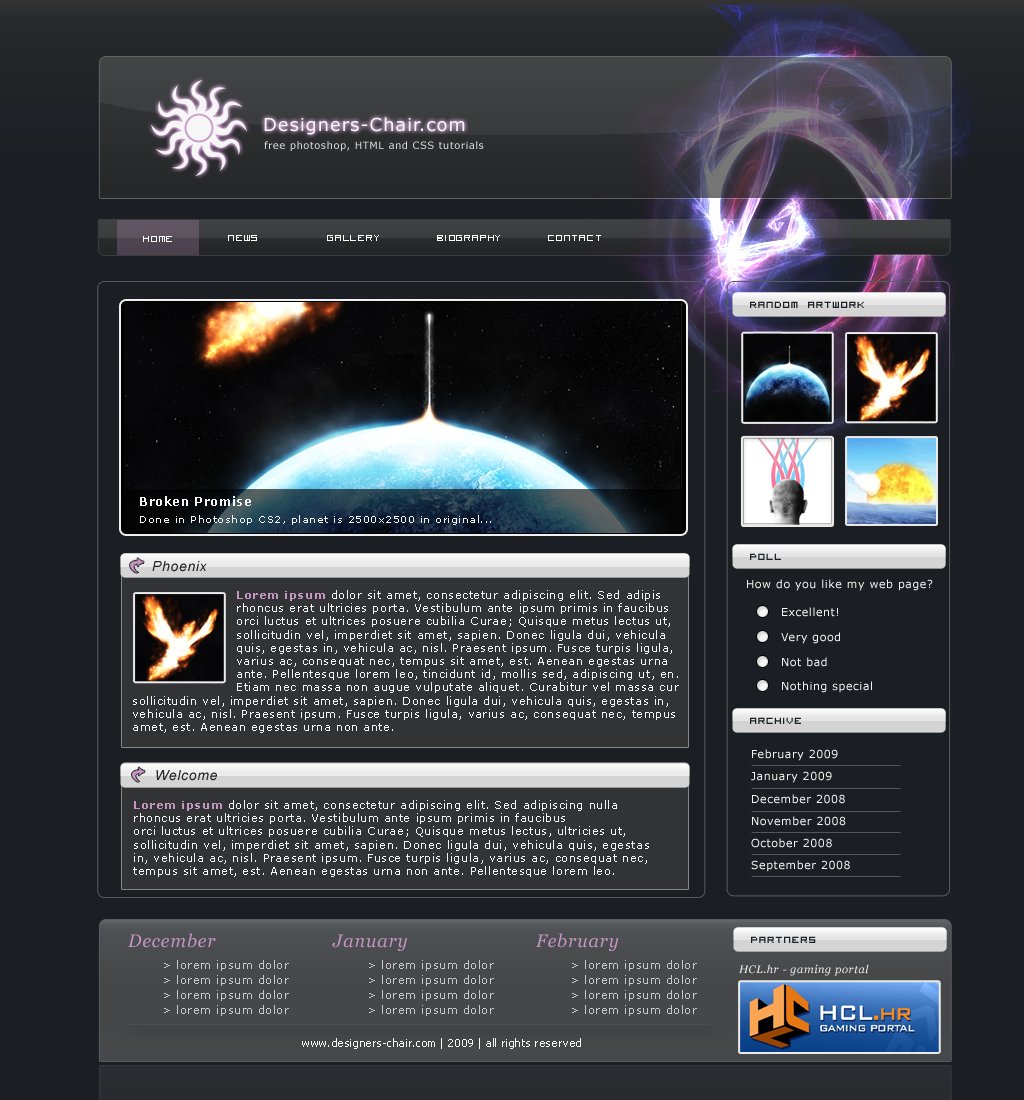
<style>
.page{position:relative;width:1024px;height:1100px;background:#1b1f23}
.page>*{position:absolute;margin:0}
.t1{font:18px "Verdana";letter-spacing:0.05em;color:#f6f6f6}
.t2{font:10px "Verdana";letter-spacing:0.05em;color:#dadada}
.t3{font:16px "VisitorTT2-BRK-";letter-spacing:0.05em;color:#ffffff}
.t4{font:16px "VisitorTT2-BRK-";letter-spacing:0.05em;color:#1c2024}
.t5{font:12px "Verdana-Bold";letter-spacing:0.05em;color:#f6f6f6}
.t6{font:10px "Verdana";letter-spacing:0.05em;color:#f6f6f6}
.t7{font:14px "Arial-ItalicMT";letter-spacing:0.05em;color:#242425}
.t8{font:11px "Verdana";letter-spacing:0.05em;color:#f1f1f1}
.t9{font:11px "Verdana";letter-spacing:0.05em;color:#f6f6f6}
.t10{font:11px "Verdana-Bold";letter-spacing:0.05em;color:#c594c1}
.t11{font:11px "Verdana";letter-spacing:0.05em;color:#f4f4f4}
.t12{font:18px "Georgia-Italic";letter-spacing:0.05em;color:#c594c1}
.t13{font:11px "Verdana";letter-spacing:0.05em;color:#c8c8c8}
.t14{font:11px "Georgia-Italic";letter-spacing:0.05em;color:#ebebeb}
.t15{font:11px "Tahoma";letter-spacing:0.05em;color:#fbfbfb}
</style>
<div class="page">
<p class="t1" style="left:264px;top:117px;width:201px;height:18px">Designers-Chair.com</p>
<p class="t2" style="left:264px;top:141px;width:220px;height:10px">free photoshop, HTML and CSS tutorials</p>
<p class="t3" style="left:143px;top:236px;width:29px;height:6px">home</p>
<p class="t3" style="left:228px;top:235px;width:29px;height:6px">news</p>
<p class="t3" style="left:327px;top:235px;width:52px;height:6px">gallery</p>
<p class="t3" style="left:437px;top:235px;width:63px;height:6px">biography</p>
<p class="t3" style="left:548px;top:235px;width:53px;height:6px">contact</p>
<p class="t4" style="left:750px;top:301px;width:114px;height:7px">Random artwork</p>
<p class="t5" style="left:140px;top:496px;width:111px;height:10px">Broken Promise</p>
<p class="t6" style="left:140px;top:515px;width:351px;height:10px">Done in Photoshop CS2, planet is 2500x2500 in original...</p>
<p class="t4" style="left:750px;top:553px;width:31px;height:7px">POLL</p>
<p class="t7" style="left:152px;top:561px;width:55px;height:11px">Phoenix</p>
<p class="t8" style="left:747px;top:579px;width:186px;height:12px">How do you like my web page?</p>
<p class="t9" style="left:237px;top:590px;width:442px;height:103px"><span class="t10">Lorem ipsum</span> dolor sit amet, consectetur adipiscing elit. Sed adipis <br>rhoncus erat ultricies porta. Vestibulum ante ipsum primis in faucibus <br>orci luctus et ultrices posuere cubilia Curae; Quisque metus lectus ut, <br>sollicitudin vel, imperdiet sit amet, sapien. Donec ligula dui, vehicula <br>quis, egestas in, vehicula ac, nisl. Praesent ipsum. Fusce turpis ligula, <br>varius ac, consequat nec, tempus sit amet, est. Aenean egestas urna<br>ante. Pellentesque lorem leo, tincidunt id, mollis sed, adipiscing ut, en. <br>Etiam nec massa non augue vulputate aliquet. Curabitur vel massa cur</p>
<p class="t11" style="left:782px;top:607px;width:56px;height:10px">Excellent!</p>
<p class="t11" style="left:781px;top:632px;width:59px;height:12px">Very good</p>
<p class="t11" style="left:782px;top:657px;width:45px;height:10px">Not bad</p>
<p class="t11" style="left:782px;top:681px;width:90px;height:12px">Nothing special</p>
<p class="t9" style="left:133px;top:696px;width:542px;height:37px">sollicitudin vel, imperdiet sit amet, sapien. Donec ligula dui, vehicula quis, egestas in, <br>vehicula ac, nisl. Praesent ipsum. Fusce turpis ligula, varius ac, consequat nec, tempus<br>amet, est. Aenean egestas urna non ante.</p>
<p class="t4" style="left:750px;top:717px;width:51px;height:7px">Archive</p>
<p class="t11" style="left:752px;top:749px;width:86px;height:12px">February 2009</p>
<p class="t7" style="left:156px;top:770px;width:61px;height:11px">Welcome</p>
<p class="t11" style="left:751px;top:771px;width:81px;height:12px">January 2009</p>
<p class="t11" style="left:752px;top:794px;width:93px;height:10px">December 2008</p>
<p class="t9" style="left:133px;top:800px;width:516px;height:77px"><span class="t10">Lorem ipsum</span> dolor sit amet, consectetur adipiscing elit. Sed adipiscing nulla <br>rhoncus erat ultricies porta. Vestibulum ante ipsum primis in faucibus <br>orci luctus et ultrices posuere cubilia Curae; Quisque metus lectus, ultricies ut, <br>sollicitudin vel, imperdiet sit amet, sapien. Donec ligula dui, vehicula quis, egestas <br>in, vehicula ac, nisl. Praesent ipsum. Fusce turpis ligula, varius ac, consequat nec, <br>tempus sit amet, est. Aenean egestas urna non ante. Pellentesque lorem leo.</p>
<p class="t11" style="left:752px;top:816px;width:94px;height:10px">November 2008</p>
<p class="t11" style="left:751px;top:838px;width:81px;height:10px">October 2008</p>
<p class="t11" style="left:751px;top:860px;width:99px;height:12px">September 2008</p>
<p class="t12" style="left:127px;top:933px;width:89px;height:15px">December</p>
<p class="t12" style="left:332px;top:934px;width:75px;height:17px">January</p>
<p class="t12" style="left:535px;top:933px;width:84px;height:18px">February</p>
<p class="t4" style="left:751px;top:936px;width:65px;height:7px">Partners</p>
<p class="t13" style="left:164px;top:960px;width:125px;height:11px">&gt; lorem ipsum dolor</p>
<p class="t13" style="left:369px;top:960px;width:125px;height:11px">&gt; lorem ipsum dolor</p>
<p class="t13" style="left:572px;top:960px;width:125px;height:11px">&gt; lorem ipsum dolor</p>
<p class="t14" style="left:738px;top:964px;width:131px;height:12px">HCL.hr - gaming portal</p>
<p class="t13" style="left:164px;top:975px;width:125px;height:11px">&gt; lorem ipsum dolor</p>
<p class="t13" style="left:369px;top:975px;width:125px;height:11px">&gt; lorem ipsum dolor</p>
<p class="t13" style="left:572px;top:975px;width:125px;height:11px">&gt; lorem ipsum dolor</p>
<p class="t13" style="left:164px;top:990px;width:125px;height:11px">&gt; lorem ipsum dolor</p>
<p class="t13" style="left:369px;top:990px;width:125px;height:11px">&gt; lorem ipsum dolor</p>
<p class="t13" style="left:572px;top:990px;width:125px;height:11px">&gt; lorem ipsum dolor</p>
<p class="t13" style="left:164px;top:1005px;width:125px;height:11px">&gt; lorem ipsum dolor</p>
<p class="t13" style="left:369px;top:1005px;width:125px;height:11px">&gt; lorem ipsum dolor</p>
<p class="t13" style="left:572px;top:1005px;width:125px;height:11px">&gt; lorem ipsum dolor</p>
<p class="t15" style="left:302px;top:1038px;width:279px;height:11px">www.designers-chair.com | 2009 | all rights reserved</p>
</div>
